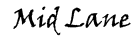
<style>
.page{position:relative;width:140px;height:40px;background:#ffffff}
.page>*{position:absolute;margin:0}
.t1{font:26.7px "VinerHandITC";color:#000000}
</style>
<div class="page">
<p class="t1" style="left:13px;top:6px;width:118px;height:30px">Mid Lane</p>
</div>
